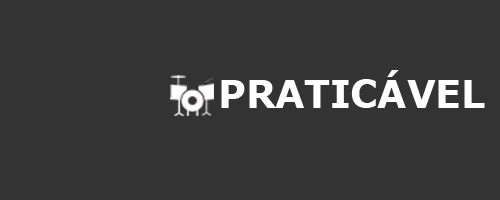
<style>
.page{position:relative;width:500px;height:200px;background:#333333}
.page>*{position:absolute;margin:0}
.t1{font:37.5px "Verdana-Bold";color:#ffffff}
</style>
<div class="page">
<p class="t1" style="left:221px;top:70px;width:264px;height:38px">PRATICÁVEL</p>
</div>
